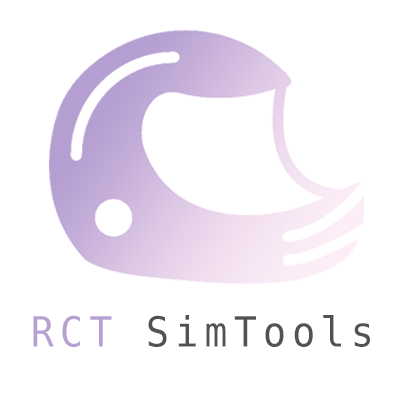
<style>
.page{position:relative;width:407px;height:407px;background:#ffffff}
.page>*{position:absolute;margin:0}
.t1{font:41.5px "DejaVuSansMono";letter-spacing:0.16em;color:#b6a0d2;scale:0.93 1}
.t2{font:41.5px "DejaVuSansMono";letter-spacing:0.16em;color:#555156;scale:0.93 1}
</style>
<div class="page">
<p class="t1" style="left:33px;top:315px;width:79px;height:32px">RCT</p>
<p class="t2" style="left:148px;top:315px;width:222px;height:32px">SimTools</p>
</div>
